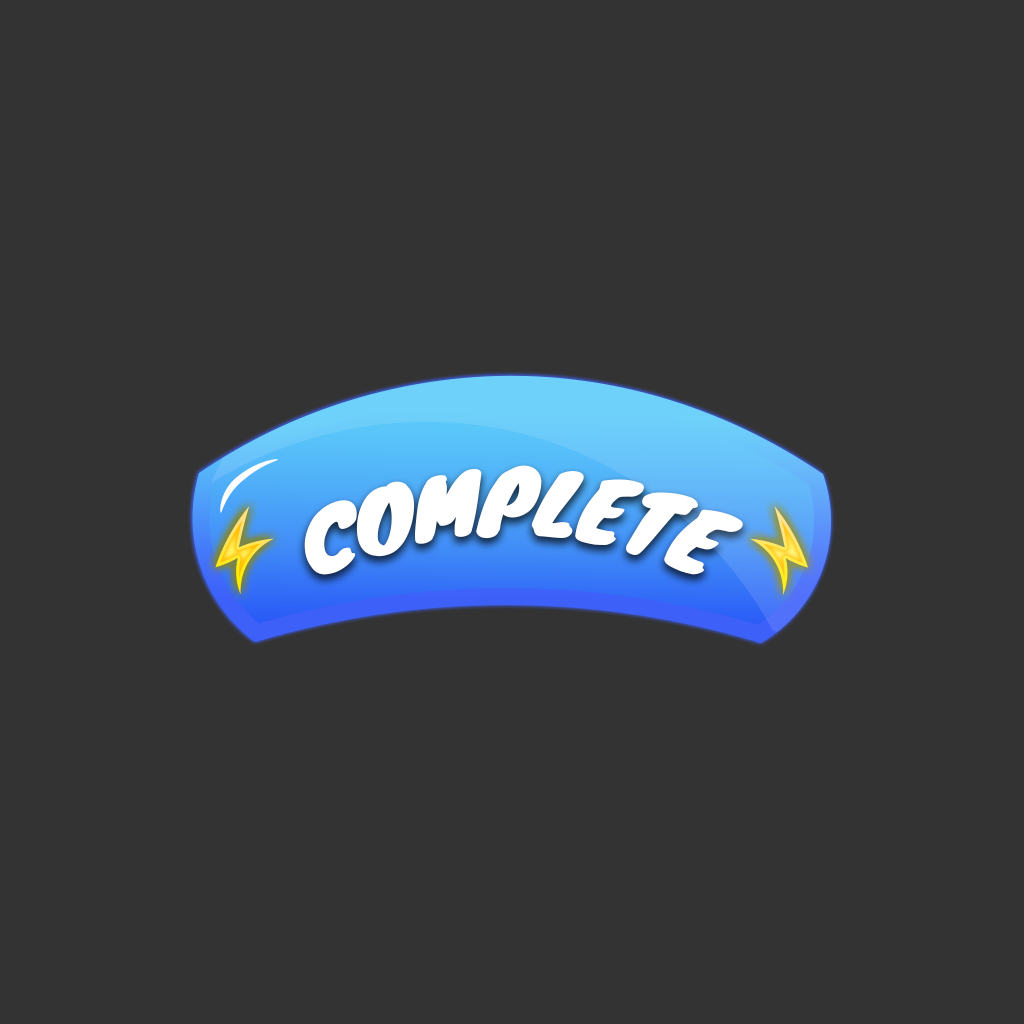
<style>
.page{position:relative;width:1024px;height:1024px;background:#333333}
.page>*{position:absolute;margin:0}
.t1{font:81px "Knewave-Regular";color:#ffffff}
</style>
<div class="page">
<p class="t1" style="left:304px;top:465px;width:439px;height:110px">COMPLETE</p>
</div>
